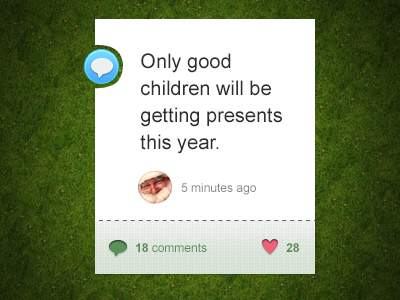
<style>
.page{position:relative;width:400px;height:300px;background:#ffffff}
.page>*{position:absolute;margin:0}
.t1{font:20px/27px "ArialMT";color:#2e2e2e}
.t2{font:12px "ArialMT";color:#888888}
.t3{font:12px "ArialMT";color:#598c58}
.t4{font:12px "Arial-BoldMT";color:#598c58}
</style>
<div class="page">
<p class="t1" style="left:140px;top:53px;width:142px;height:101px">Only good<br>children will be<br>getting presents<br>this year.</p>
<p class="t2" style="left:181px;top:183px;width:75px;height:12px">5 minutes ago</p>
<p class="t3" style="left:136px;top:243px;width:71px;height:9px"><span class="t4">18</span> comments</p>
<p class="t4" style="left:286px;top:243px;width:13px;height:9px">28</p>
</div>
